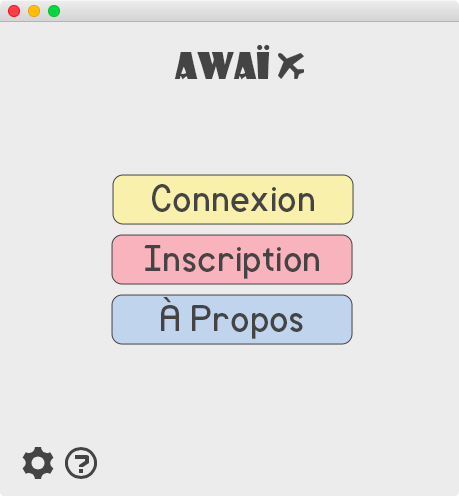
<style>
.page{position:relative;width:459px;height:496px;background:#ececec}
.page>*{position:absolute;margin:0}
.t1{font:36px "ShowcardGothic-Reg";color:#444444}
.t2{font:36px "Mockup-Regular";color:#444444}
</style>
<div class="page">
<p class="t1" style="left:174px;top:45px;width:96px;height:35px">AWAÏ</p>
<p class="t2" style="left:152px;top:184px;width:162px;height:28px">Connexion</p>
<p class="t2" style="left:144px;top:245px;width:175px;height:34px">Inscription</p>
<p class="t2" style="left:161px;top:297px;width:142px;height:42px">À Propos</p>
</div>
